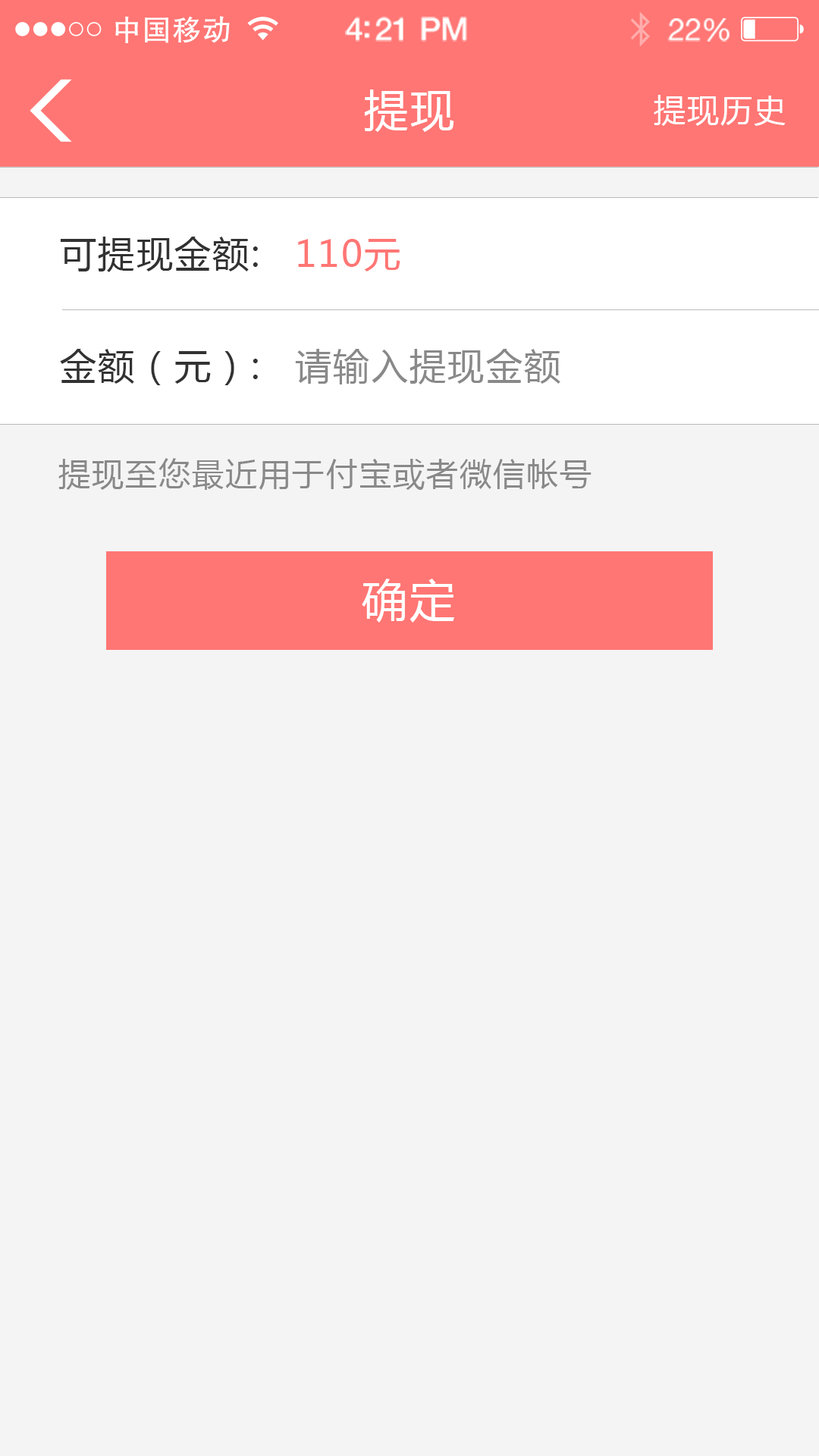
<style>
.page{position:relative;width:819px;height:1456px;background:#f4f4f4}
.page>*{position:absolute;margin:0}
.t1{font:29.4px "FZHTJW--GB1-0";letter-spacing:0.02em;color:#ffffff}
.t2{font:32px "HelveticaNeue-Medium";letter-spacing:-0.02em;color:#ffffff}
.t3{font:30.7px "HelveticaNeue";letter-spacing:-0.02em;color:#ffffff}
.t4{font:44px "MicrosoftYaHei";letter-spacing:0.05em;color:#ffffff}
.t5{font:31.8px "MicrosoftYaHei";letter-spacing:0.05em;color:#ffffff}
.t6{font:36.4px "MicrosoftYaHei";letter-spacing:0.05em;color:#323232}
.t7{font:36.4px "MicrosoftYaHei";letter-spacing:0.05em;color:#ff7674}
.t8{font:36.4px "MicrosoftYaHei";letter-spacing:0.05em;color:#898989}
.t9{font:31.8px "MicrosoftYaHei";letter-spacing:0.05em;color:#898989}
.t10{font:45.5px "MicrosoftYaHei";letter-spacing:0.05em;color:#ffffff}
</style>
<div class="page">
<p class="t1" style="left:115px;top:16px;width:115px;height:27px">中国移动</p>
<p class="t2" style="left:345px;top:17px;width:122px;height:25px">4:21 PM</p>
<p class="t3" style="left:667px;top:18px;width:63px;height:24px">22%</p>
<p class="t4" style="left:364px;top:89px;width:90px;height:43px">提现</p>
<p class="t5" style="left:654px;top:95px;width:132px;height:31px">提现历史</p>
<p class="t6" style="left:60px;top:237px;width:198px;height:35px">可提现金额:</p>
<p class="t7" style="left:298px;top:239px;width:102px;height:32px">110元</p>
<p class="t6" style="left:60px;top:349px;width:198px;height:36px">金额（元）:</p>
<p class="t8" style="left:295px;top:349px;width:265px;height:35px">请输入提现金额</p>
<p class="t9" style="left:58px;top:458px;width:533px;height:32px">提现至您最近用于付宝或者微信帐号</p>
<p class="t10" style="left:362px;top:579px;width:93px;height:44px">确定</p>
</div>
